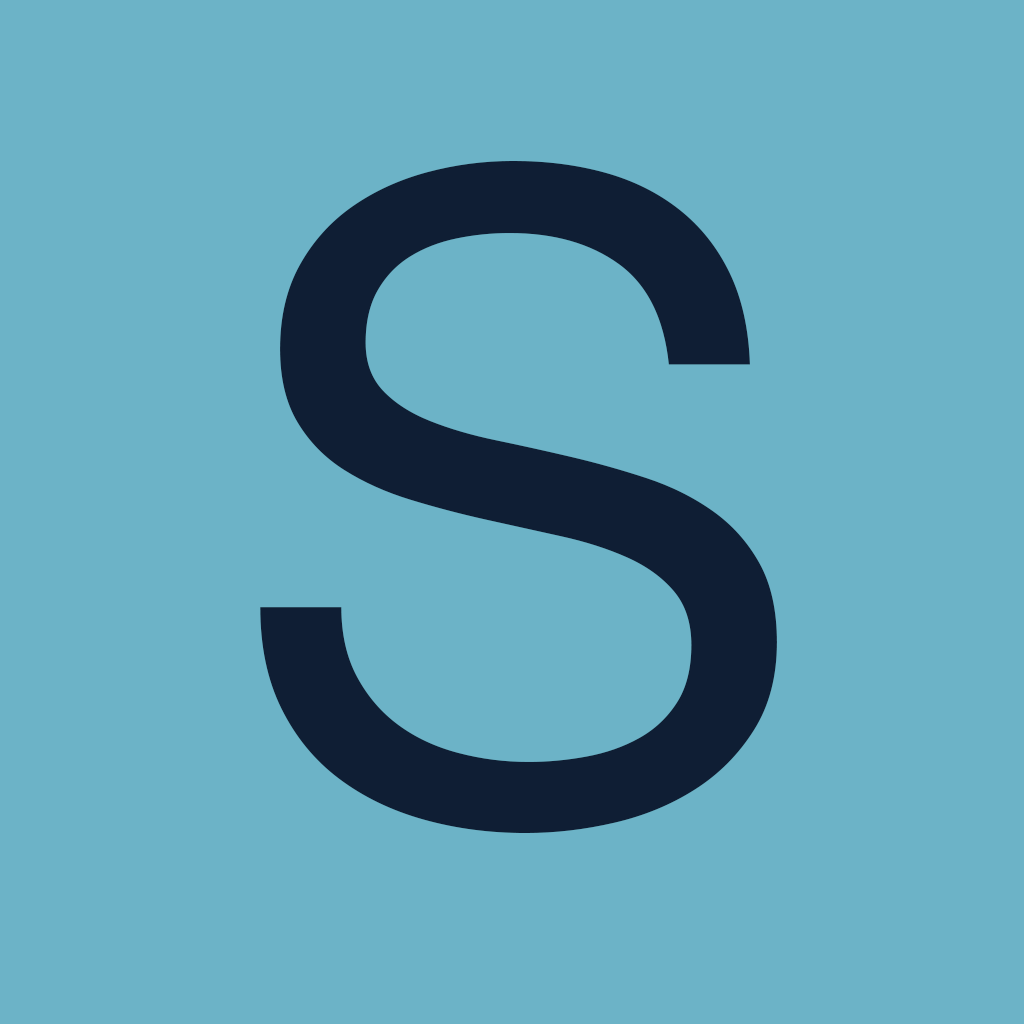
<style>
.page{position:relative;width:1024px;height:1024px;background:#6cb3c7}
.page>*{position:absolute;margin:0}
.t1{font:900px "HelveticaNeue";color:#0f1e34}
</style>
<div class="page">
<p class="t1" style="left:260px;top:161px;width:517px;height:672px">S</p>
</div>
